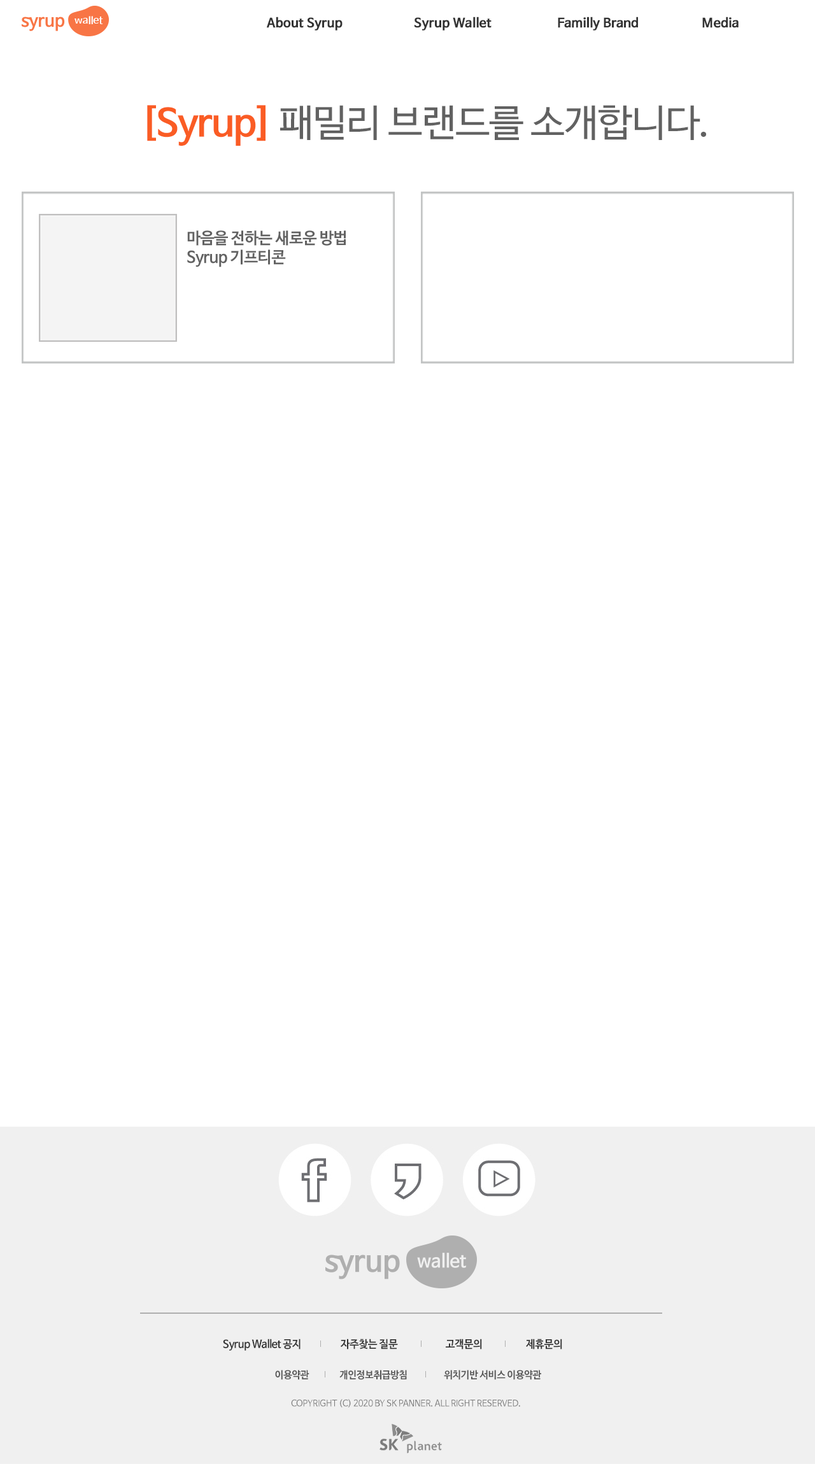
<style>
.page{position:relative;width:815px;height:1464px;background:#ffffff}
.page>*{position:absolute;margin:0}
.t1{font:12.4px "NanumBarunGothicBold";color:#333333;font-weight:bold}
.t2{font:37.7px "NanumBarunGothic";letter-spacing:-0.025em;color:#616161}
.t3{font:37.7px "NanumBarunGothicBold";letter-spacing:-0.025em;color:#fa5c24}
.t4{font:15.9px "NanumBarunGothicBold";letter-spacing:-0.025em;color:#626262}
.t5{font:10.7px "NanumBarunGothicBold";letter-spacing:-0.025em;color:#333333}
.t6{font:10px "NanumBarunGothicBold";letter-spacing:-0.025em;color:#555555}
.t7{font:8.9px "NanumBarunGothic";letter-spacing:-0.025em;color:#777777}
</style>
<div class="page">
<p class="t1" style="left:267px;top:17px;width:75px;height:14px">About Syrup</p>
<p class="t1" style="left:414px;top:17px;width:77px;height:14px">Syrup Wallet</p>
<p class="t1" style="left:558px;top:17px;width:80px;height:14px">Familly Brand</p>
<p class="t1" style="left:702px;top:17px;width:36px;height:11px">Media</p>
<p class="t2" style="left:147px;top:105px;width:559px;height:41px"><span class="t3">[Syrup] </span>패밀리 브랜드를 소개합니다.</p>
<p class="t4" style="left:187px;top:230px;width:159px;height:37px">마음을 전하는 새로운 방법<br>Syrup 기프티콘</p>
<p class="t5" style="left:223px;top:1338px;width:77px;height:12px">Syrup Wallet 공지</p>
<p class="t5" style="left:340px;top:1338px;width:58px;height:11px">자주찾는 질문</p>
<p class="t5" style="left:445px;top:1338px;width:37px;height:11px">고객문의</p>
<p class="t5" style="left:526px;top:1338px;width:36px;height:11px">제휴문의</p>
<p class="t6" style="left:275px;top:1370px;width:34px;height:10px">이용약관</p>
<p class="t6" style="left:339px;top:1370px;width:68px;height:10px">개인정보취급방침</p>
<p class="t6" style="left:444px;top:1370px;width:97px;height:10px">위치기반 서비스 이용약관</p>
<p class="t7" style="left:291px;top:1399px;width:229px;height:8px">COPYRIGHT (C) 2020 BY SK PANNER. ALL RIGHT RESERVED.</p>
</div>
